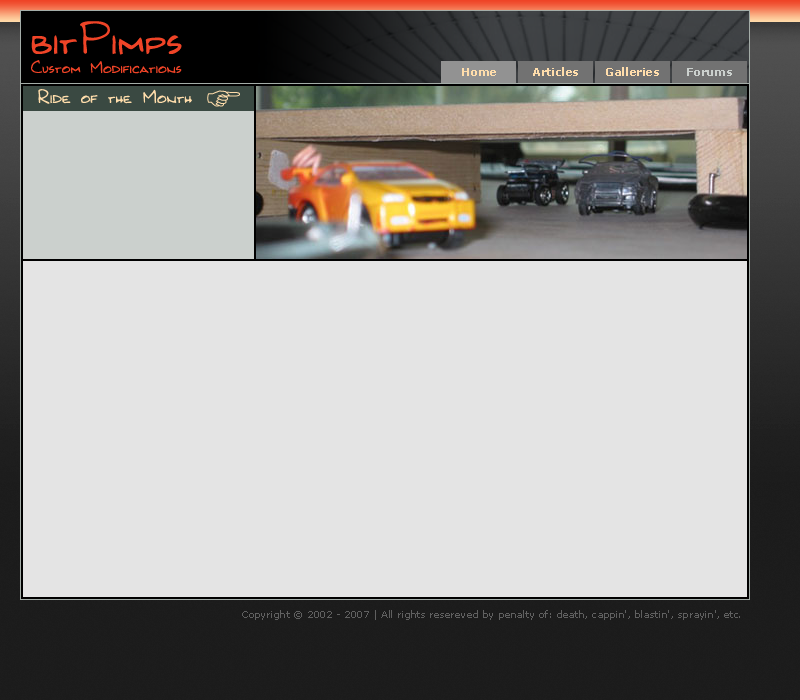
<style>
.page{position:relative;width:800px;height:700px;background:#e4e4e4}
.page>*{position:absolute;margin:0}
.t1{font:48px "Kilroy-WasHere";color:#ef4427}
.t2{font:18px "Kilroy-WasHere";color:#ef4427}
.t3{font:11px "Verdana-Bold";color:#ffddab}
.t4{font:11px "Verdana-Bold";color:#cbd0cd}
.t5{font:20px "Kilroy-WasHere";color:#ffddab}
.t6{font:10px "Verdana";color:#606060}
</style>
<div class="page">
<p class="t1" style="left:31px;top:21px;width:151px;height:34px">bitPimps</p>
<p class="t2" style="left:31px;top:60px;width:151px;height:14px">Custom Modifications</p>
<p class="t3" style="left:462px;top:68px;width:34px;height:8px">Home</p>
<p class="t3" style="left:533px;top:67px;width:45px;height:9px">Articles</p>
<p class="t3" style="left:606px;top:67px;width:53px;height:9px">Galleries</p>
<p class="t4" style="left:687px;top:68px;width:45px;height:8px">Forums</p>
<p class="t5" style="left:38px;top:89px;width:154px;height:15px">Ride of the Month</p>
<p class="t6" style="left:242px;top:610px;width:498px;height:10px">Copyright © 2002 - 2007 | All rights resereved by penalty of: death, cappin', blastin', sprayin', etc.</p>
</div>
